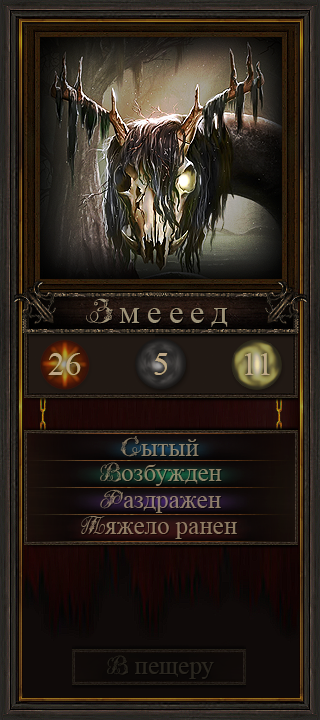
<style>
.page{position:relative;width:320px;height:720px}
.page>*{position:absolute;margin:0}
.t1{font:33.3px "TimesNewRomanPSMT";letter-spacing:0.2em;color:#9d9379}
.t2{font:33.3px "Tchekhonin2";letter-spacing:0.2em;color:#9d9379}
.t3{font:33.3px "TimesNewRomanPSMT";color:#bda788}
.t4{font:25px "TimesNewRomanPSMT";color:#7f7565}
.t5{font:25px "Tchekhonin2";color:#7f7565}
.t6{font:25px "TimesNewRomanPSMT";color:#29251e}
.t7{font:25px "Tchekhonin2";color:#29251e}
</style>
<div class="page">
<p class="t1" style="left:86px;top:298px;width:142px;height:29px"><span class="t2">з</span>меeед</p>
<p class="t3" style="left:48px;top:353px;width:33px;height:22px">26</p>
<p class="t3" style="left:154px;top:353px;width:14px;height:22px">5</p>
<p class="t3" style="left:245px;top:353px;width:25px;height:22px">11</p>
<p class="t4" style="left:120px;top:436px;width:79px;height:21px;opacity:0.8"><span class="t5">С</span>ытый</p>
<p class="t4" style="left:100px;top:462px;width:122px;height:24px;opacity:0.8"><span class="t5">В</span>озбужден</p>
<p class="t4" style="left:100px;top:489px;width:121px;height:24px;opacity:0.8"><span class="t5">Р</span>аздражен</p>
<p class="t4" style="left:81px;top:516px;width:156px;height:23px;opacity:0.8"><span class="t5">Т</span>яжело ранен</p>
<p class="t6" style="left:107px;top:655px;width:107px;height:24px"><span class="t7">В</span> пещеру</p>
</div>
